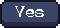
<style>
.page{position:relative;width:60px;height:28px;background:#3a4466}
.page>*{position:absolute;margin:0}
.t1{font:16.5px "OfMiceAndCats";color:#ffffff}
</style>
<div class="page">
<p class="t1" style="left:15px;top:6px;width:29px;height:11px">Yes</p>
</div>
